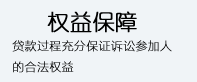
<style>
.page{position:relative;width:197px;height:82px;background:#f0f4f7}
.page>*{position:absolute;margin:0}
.t1{font:22px "YouYuan";color:#000000;font-weight:bold}
.t2{font:12px "FZLTCXHJW--GB1-0";color:#000000;font-weight:bold}
</style>
<div class="page">
<p class="t1" style="left:47px;top:11px;width:90px;height:22px">权益保障</p>
<p class="t2" style="left:12px;top:40px;width:160px;height:33px">贷款过程充分保证诉讼参加人<br>的合法权益</p>
</div>
